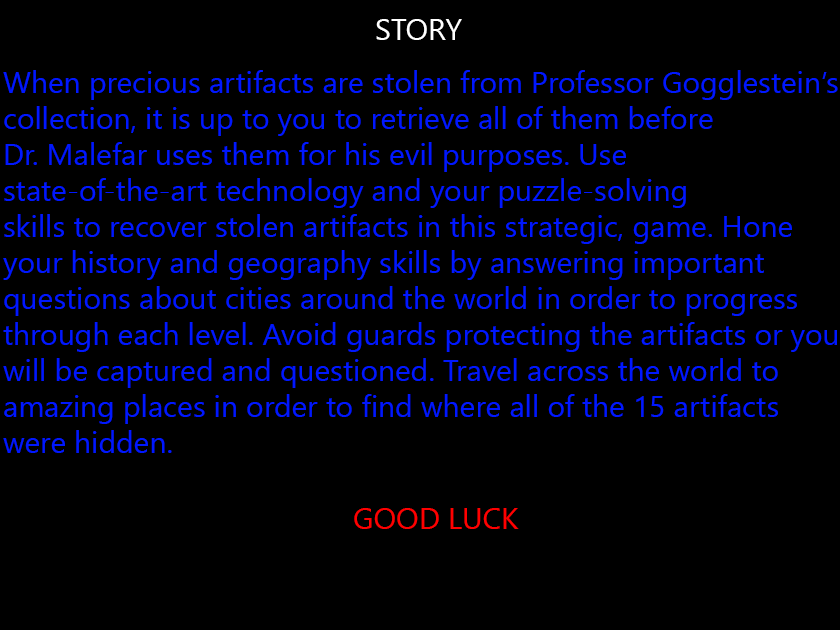
<style>
.page{position:relative;width:840px;height:630px;background:#000000}
.page>*{position:absolute;margin:0}
.t1{font:30px "SegoeUI";color:#ffffff}
.t2{font:30px "SegoeUI";color:#0018fe}
.t3{font:30px "SegoeUI";color:#ff0000}
</style>
<div class="page">
<p class="t1" style="left:376px;top:19px;width:86px;height:21px">STORY</p>
<p class="t2" style="left:3px;top:70px;width:835px;height:383px">When precious artifacts are stolen from Professor Gogglestein’s<br>collection, it is up to you to retrieve all of them before <br>Dr. Malefar uses them for his evil purposes. Use <br>state-of-the-art technology and your puzzle-solving <br>skills to recover stolen artifacts in this strategic, game. Hone <br>your history and geography skills by answering important <br>questions about cities around the world in order to progress <br>through each level. Avoid guards protecting the artifacts or you <br>will be captured and questioned. Travel across the world to <br>amazing places in order to find where all of the 15 artifacts <br>were hidden.</p>
<p class="t3" style="left:354px;top:508px;width:165px;height:21px">GOOD LUCK</p>
</div>
